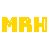
<style>
.page{position:relative;width:50px;height:50px;background:#ffffff}
.page>*{position:absolute;margin:0}
.t1{font:20px "BungeeInline-Regular";color:#ffd600}
</style>
<div class="page">
<p class="t1" style="left:2px;top:17px;width:45px;height:15px">mrh</p>
</div>
